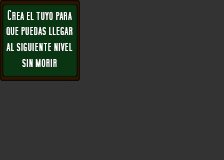
<style>
.page{position:relative;width:224px;height:160px;background:#333333}
.page>*{position:absolute;margin:0}
.t1{font:13.1px "SFMoviePoster";color:#fefefe;scale:0.9 1}
</style>
<div class="page">
<p class="t1" style="left:6px;top:10px;width:67px;height:57px;text-align:center">Crea el tuyo para que puedas llegar al siguiente nivel sin morir</p>
</div>
